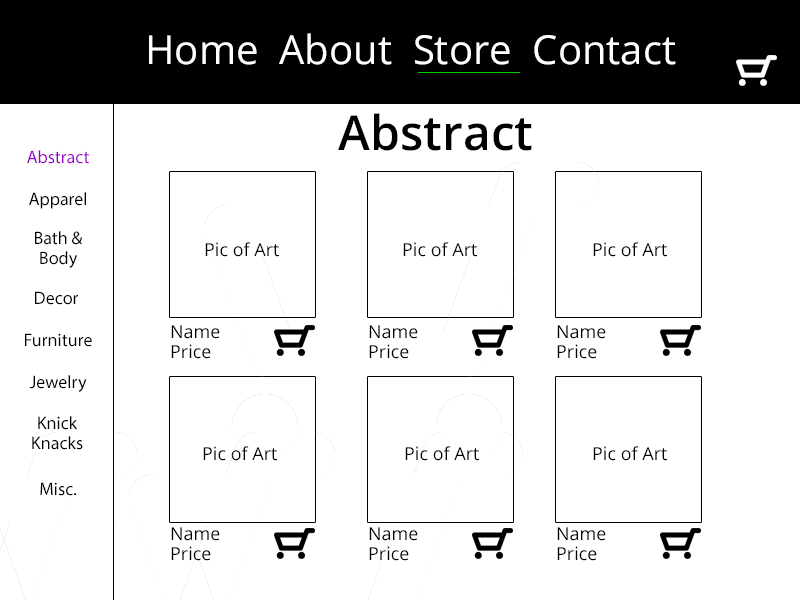
<style>
.page{position:relative;width:800px;height:600px;background:#ffffff}
.page>*{position:absolute;margin:0}
.t1{font:40px "OpenSans";color:#ffffff}
.t2{font:40px "MyriadPro-Regular";color:#000000}
.t3{font:48px "OpenSans-Semibold";color:#000000}
.t4{font:18px "OpenSans";color:#9900cc}
.t5{font:18px "OpenSans";color:#000000}
.t6{font:18px/20px "OpenSans";color:#000000}
</style>
<div class="page">
<p class="t1" style="left:149px;top:33px;width:540px;height:32px">Home  About  Store  Contact<span class="t2">t</span></p>
<p class="t3" style="left:338px;top:113px;width:194px;height:38px">Abstract</p>
<p class="t4" style="left:27px;top:150px;width:62px;height:14px">Abstract</p>
<p class="t5" style="left:29px;top:192px;width:57px;height:17px">Apparel</p>
<p class="t6" style="left:35px;top:231px;width:48px;height:37px;text-align:center">Bath &amp; <br>Body</p>
<p class="t5" style="left:205px;top:242px;width:74px;height:15px">Pic of Art</p>
<p class="t5" style="left:403px;top:242px;width:74px;height:15px">Pic of Art</p>
<p class="t5" style="left:593px;top:242px;width:74px;height:15px">Pic of Art</p>
<p class="t5" style="left:35px;top:291px;width:43px;height:14px">Decor</p>
<p class="t6" style="left:171px;top:325px;width:49px;height:34px">Name<br>Price</p>
<p class="t6" style="left:369px;top:325px;width:49px;height:34px">Name<br>Price</p>
<p class="t6" style="left:557px;top:325px;width:49px;height:34px">Name<br>Price</p>
<p class="t5" style="left:25px;top:333px;width:67px;height:14px">Furniture</p>
<p class="t5" style="left:29px;top:375px;width:58px;height:17px">Jewelry</p>
<p class="t6" style="left:32px;top:416px;width:51px;height:34px;text-align:center">Knick<br>Knacks</p>
<p class="t5" style="left:203px;top:446px;width:74px;height:15px">Pic of Art</p>
<p class="t5" style="left:405px;top:446px;width:74px;height:15px">Pic of Art</p>
<p class="t5" style="left:593px;top:446px;width:74px;height:15px">Pic of Art</p>
<p class="t5" style="left:40px;top:482px;width:37px;height:14px">Misc.</p>
<p class="t6" style="left:171px;top:527px;width:49px;height:34px">Name<br>Price</p>
<p class="t6" style="left:369px;top:527px;width:49px;height:34px">Name<br>Price</p>
<p class="t6" style="left:557px;top:527px;width:49px;height:34px">Name<br>Price</p>
</div>
